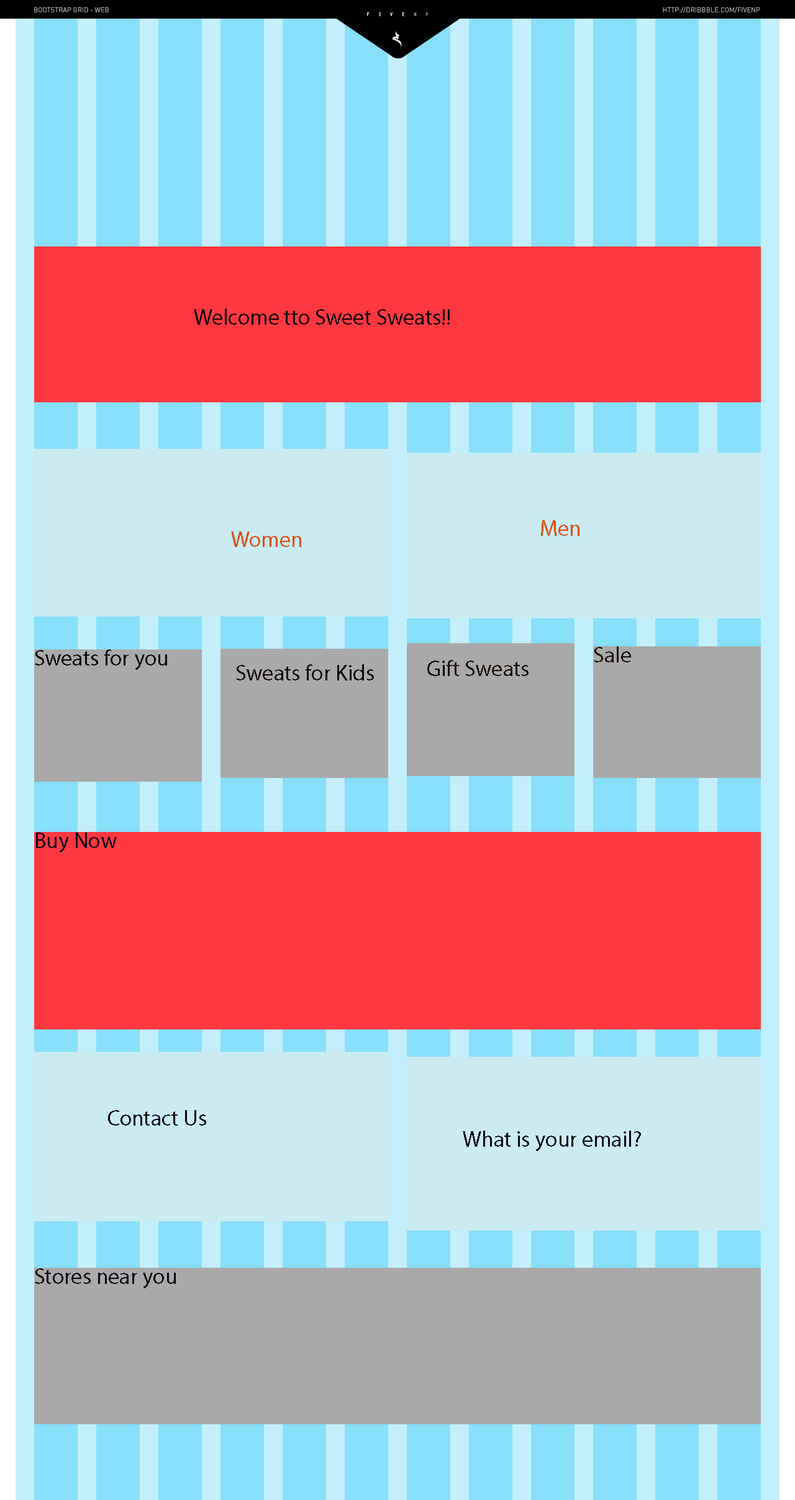
<style>
.page{position:relative;width:795px;height:1500px}
.page>*{position:absolute;margin:0}
.t1{font:22.4px "MyriadPro-Regular";color:#0a010b}
.t2{font:22.4px "MyriadPro-Regular";color:#dd4f09}
.t3{font:22.4px "MyriadPro-Regular";color:#050200}
.t4{font:22.4px "MyriadPro-Regular";color:#170a04}
.t5{font:22.4px "MyriadPro-Regular";color:#0f0703}
.t6{font:22.4px "MyriadPro-Regular";color:#170801}
.t7{font:22.4px "MyriadPro-Regular";color:#0c0114}
</style>
<div class="page">
<p class="t1" style="left:194px;top:309px;width:256px;height:16px">Welcome tto Sweet Sweats!!</p>
<p class="t2" style="left:541px;top:520px;width:38px;height:16px">Men</p>
<p class="t2" style="left:231px;top:532px;width:70px;height:15px">Women</p>
<p class="t3" style="left:35px;top:650px;width:132px;height:20px">Sweats for you</p>
<p class="t4" style="left:594px;top:646px;width:37px;height:17px">Sale</p>
<p class="t5" style="left:237px;top:664px;width:137px;height:17px">Sweats for Kids</p>
<p class="t6" style="left:427px;top:660px;width:101px;height:16px">Gift Sweats</p>
<p class="t7" style="left:36px;top:833px;width:81px;height:20px">Buy Now</p>
<p class="t7" style="left:108px;top:1110px;width:98px;height:16px">Contact Us</p>
<p class="t7" style="left:463px;top:1131px;width:178px;height:20px">What is your email?</p>
<p class="t7" style="left:35px;top:1269px;width:141px;height:19px">Stores near you</p>
</div>
